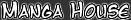
<style>
.page{position:relative;width:131px;height:20px}
.page>*{position:absolute;margin:0}
.t1{font:16px "MangaTemple";color:#ffffff}
.t2{font:19.6px "MangaTemple";color:#ffffff}
</style>
<div class="page">
<p class="t1" style="left:2px;top:1px;width:128px;height:18px"><span class="t2">M</span>anga<span class="t2"> H</span>ouse</p>
<p class="t1" style="left:2px;top:1px;width:128px;height:18px"><span class="t2">M</span>anga<span class="t2"> H</span>ouse</p>
</div>
